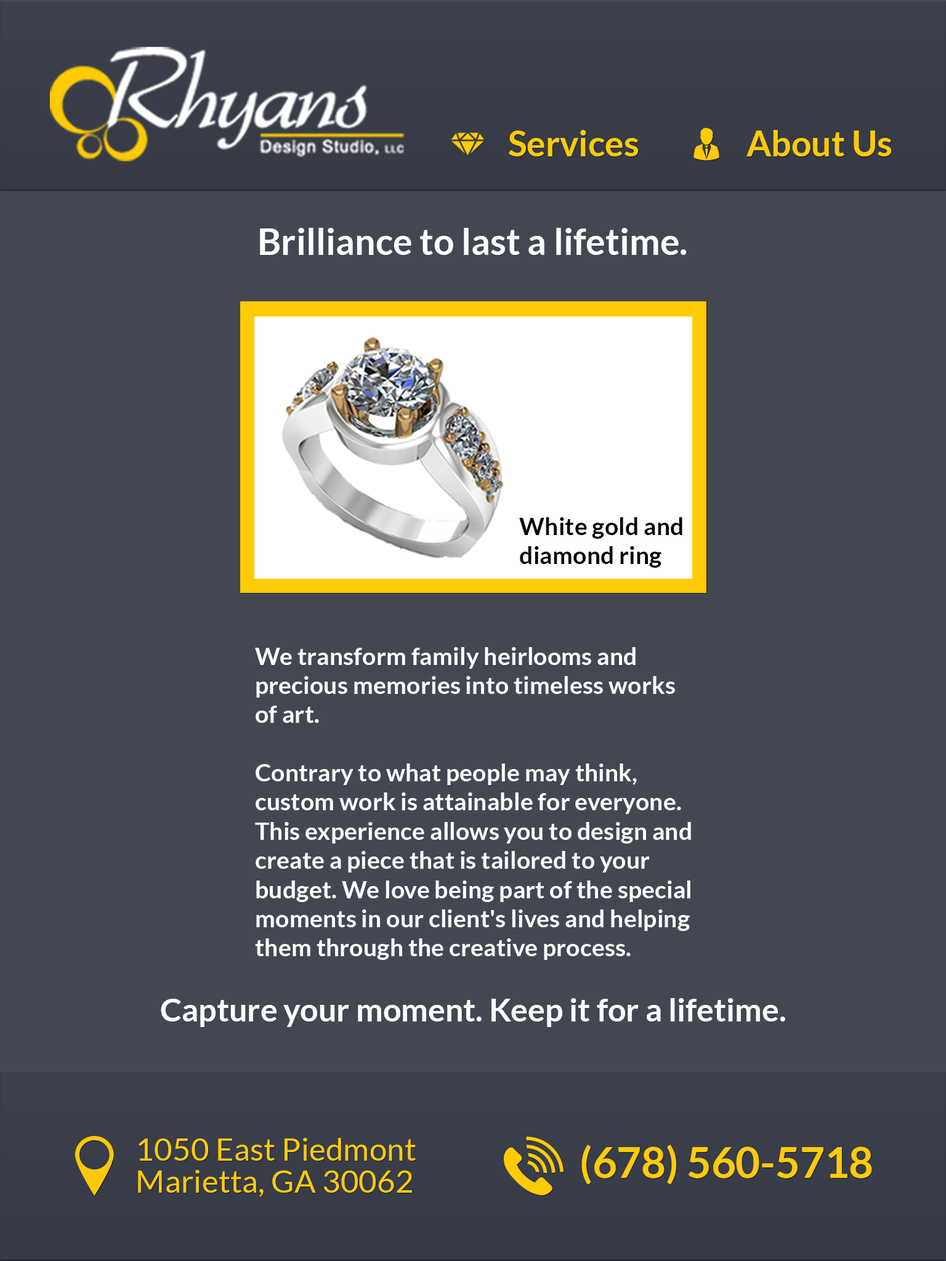
<style>
.page{position:relative;width:946px;height:1261px;background:#424752}
.page>*{position:absolute;margin:0}
.t1{font:35.2px "Lato-Bold";color:#ffcb05}
.t2{font:36.5px "Lato-Bold";color:#ffffff}
.t3{font:24.3px "Lato-Bold";color:#000000}
.t4{font:24.3px "Lato-Bold";color:#ffffff}
.t5{font:32px "Lato-Bold";color:#ffffff}
.t6{font:31.7px/31.7px "Lato-Regular";color:#ffcb05}
.t7{font:42.3px "Lato-Bold";color:#ffcb05}
</style>
<div class="page">
<p class="t1" style="left:509px;top:130px;width:129px;height:26px">Services</p>
<p class="t1" style="left:746px;top:130px;width:145px;height:26px">About Us</p>
<p class="t2" style="left:260px;top:228px;width:426px;height:27px">Brilliance to last a lifetime.</p>
<p class="t3" style="left:519px;top:517px;width:163px;height:51px">White gold and<br>diamond ring</p>
<p class="t4" style="left:255px;top:647px;width:436px;height:313px">We transform family heirlooms and <br>precious memories into timeless works<br>of art.<br><br>Contrary to what people may think,<br>custom work is attainable for everyone.<br>This experience allows you to design and <br>create a piece that is tailored to your<br>budget. We love being part of the special<br>moments in our client's lives and helping<br>them through the creative process.</p>
<p class="t5" style="left:161px;top:998px;width:624px;height:29px">Capture your moment. Keep it for a lifetime.</p>
<p class="t6" style="left:138px;top:1138px;width:278px;height:59px">1050 East Piedmont<br>Marietta, GA 30062</p>
<p class="t7" style="left:581px;top:1145px;width:291px;height:40px">(678) 560-5718</p>
</div>
